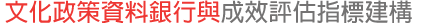
<style>
.page{position:relative;width:423px;height:23px;background:#ffffff}
.page>*{position:absolute;margin:0}
.t1{font:24px "AdobeFanHeitiStd-Bold";color:#ee3733}
.t2{font:24px "AdobeFanHeitiStd-Bold";color:#747373}
</style>
<div class="page">
<p class="t1" style="left:5px;top:0px;width:407px;height:24px">文化政策資料銀行與<span class="t2">成效評估指標建構</span></p>
</div>
